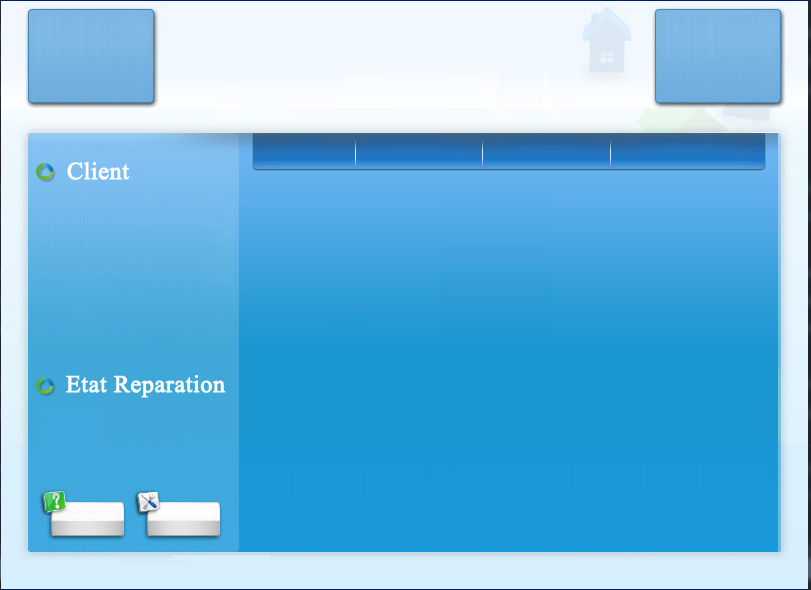
<style>
.page{position:relative;width:811px;height:590px}
.page>*{position:absolute;margin:0}
.t1{font:24px "TimesNewRomanPSMT";color:#ffffff;font-weight:bold}
</style>
<div class="page">
<p class="t1" style="left:67px;top:162px;width:63px;height:18px">Client</p>
<p class="t1" style="left:66px;top:375px;width:160px;height:23px">Etat Reparation</p>
</div>
